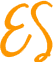
<style>
.page{position:relative;width:53px;height:62px;background:#ffffff}
.page>*{position:absolute;margin:0}
.t1{font:46px "MASexy";letter-spacing:0.025em;color:#fc9600}
.t2{font:36px "MASexy";letter-spacing:0.2em;color:#fc9600}
</style>
<div class="page">
<p class="t1" style="left:1px;top:1px;width:51px;height:61px">E <span class="t2">S</span></p>
</div>
